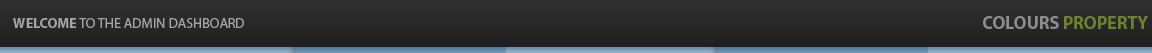
<style>
.page{position:relative;width:1152px;height:53px}
.page>*{position:absolute;margin:0}
.t1{font:18px "MyriadPro-Bold"}
.t2{font:14px "MyriadPro-Regular";color:#a7a5a5}
.t3{font:14px "MyriadPro-Bold";color:#a7a5a5}
</style>
<div class="page">
<p class="t1" style="left:983px;top:16px;width:165px;height:13px">COLOURS PROPERTY</p>
<p class="t2" style="left:13px;top:18px;width:231px;height:10px"><span class="t3">WELCOME</span> TO THE ADMIN DASHBOARD</p>
</div>
